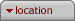
<style>
.page{position:relative;width:75px;height:21px;background:#c7c6c6}
.page>*{position:absolute;margin:0}
.t1{font:10px "Verdana";letter-spacing:-0.02em;color:#660000}
</style>
<div class="page">
<p class="t1" style="left:16px;top:6px;width:36px;height:8px">location</p>
</div>
